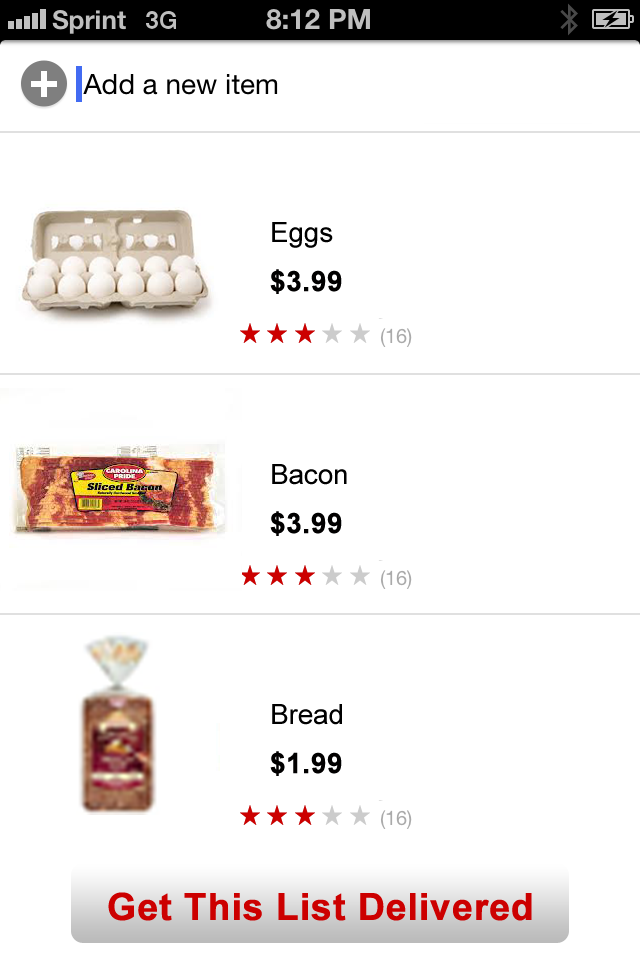
<style>
.page{position:relative;width:640px;height:960px;background:#ffffff}
.page>*{position:absolute;margin:0}
.t1{font:27.7px "ArialMT";color:#000000}
.t2{font:25.7px "Arial-BoldMT";color:#cc0000}
.t3{font:27.7px "Arial-BoldMT";color:#010000;font-weight:bold}
.t4{font:37.3px "Arial-BoldMT";color:#cc0000;font-weight:bold}
</style>
<div class="page">
<p class="t1" style="left:272px;top:222px;width:61px;height:26px"><span class="t2"><br><br></span>Eggs</p>
<p class="t3" style="left:270px;top:269px;width:72px;height:25px">$3.99</p>
<p class="t1" style="left:272px;top:464px;width:75px;height:21px"><span class="t2"><br><br></span>Bacon</p>
<p class="t3" style="left:270px;top:511px;width:72px;height:25px">$3.99</p>
<p class="t1" style="left:272px;top:704px;width:70px;height:21px"><span class="t2"><br><br></span>Bread</p>
<p class="t3" style="left:270px;top:751px;width:72px;height:25px">$1.99</p>
<p class="t4" style="left:108px;top:892px;width:424px;height:29px">Get This List Delivered</p>
</div>
